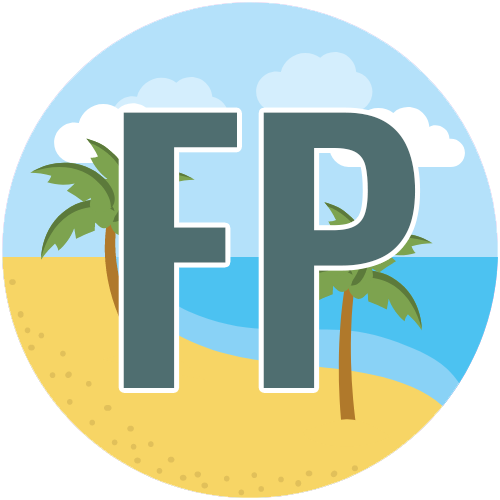
<style>
.page{position:relative;width:500px;height:500px;background:#ffffff}
.page>*{position:absolute;margin:0}
.t1{font:340px "Oswald-Medium";color:#4f6e70}
</style>
<div class="page">
<p class="t1" style="left:123px;top:112px;width:293px;height:276px">FP</p>
</div>
